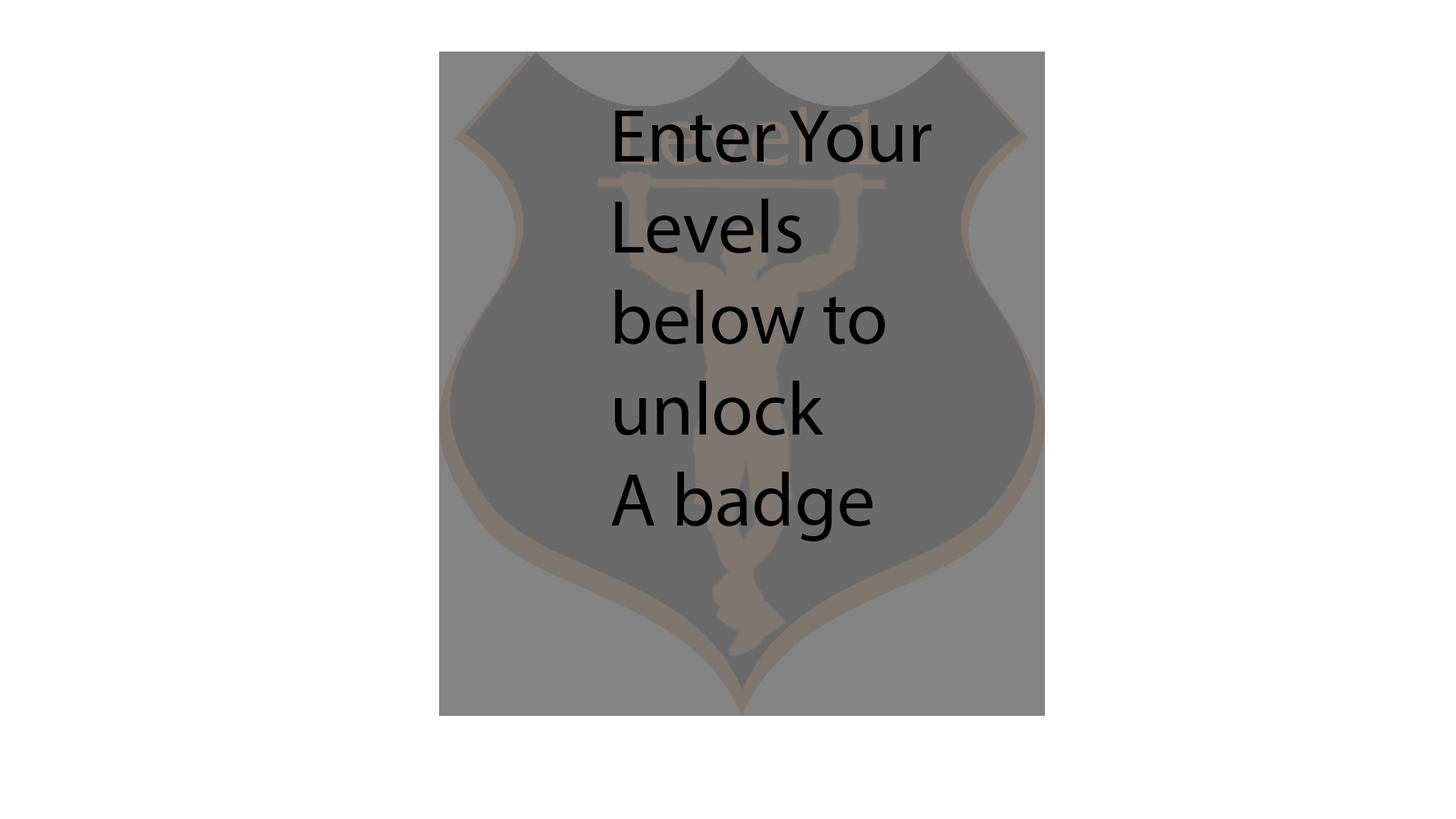
<style>
.page{position:relative;width:1456px;height:819px;background:#ffffff}
.page>*{position:absolute;margin:0}
.t1{font:75.8px "MyriadPro-Regular";color:#000000}
</style>
<div class="page">
<p class="t1" style="left:611px;top:111px;width:321px;height:430px">Enter Your <br>Levels <br>below to <br>unlock <br>A badge</p>
</div>
